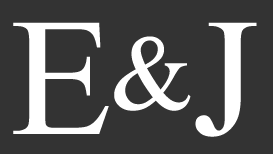
<style>
.page{position:relative;width:273px;height:154px;background:#333333}
.page>*{position:absolute;margin:0}
.t1{font:208.3px "Aparajita";letter-spacing:-0.01em;color:#ffffff}
.t2{font:132.8px "Aparajita";letter-spacing:-0.01em;color:#ffffff}
</style>
<div class="page">
<p class="t1" style="left:13px;top:22px;width:244px;height:115px">E<span class="t2">&amp;</span>J</p>
</div>
